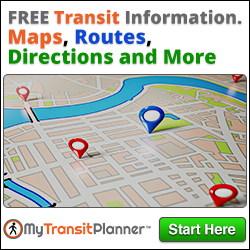
<style>
.page{position:relative;width:250px;height:250px;background:#ffffff}
.page>*{position:absolute;margin:0}
.t1{font:20px/20px "OpenSans-ExtraBold";color:#089200}
.t2{font:18px/20px "OpenSans-ExtraBold";color:#67686b}
.t3{font:18px/20px "OpenSans-ExtraBold";color:#ef5f22}
.t4{font:20px/20px "OpenSans-ExtraBold";color:#ef5f22}
.t5{font:20px/20px "OpenSans-ExtraBold";color:#000000}
.t6{font:20px/20px "OpenSans-ExtraBold";color:#0e4ad1}
.t7{font:14px "Helvetica-Bold";color:#ffffff}
</style>
<div class="page">
<p class="t1" style="left:9px;top:9px;width:233px;height:55px"><span class="t2">FREE </span><span class="t3">Transit </span><span class="t2">Information.<br></span><span class="t4">Maps</span><span class="t5">, </span><span class="t6">Routes</span><span class="t5">,<br></span>Directions and More</p>
<p class="t7" style="left:169px;top:223px;width:67px;height:12px">Start Here</p>
</div>
